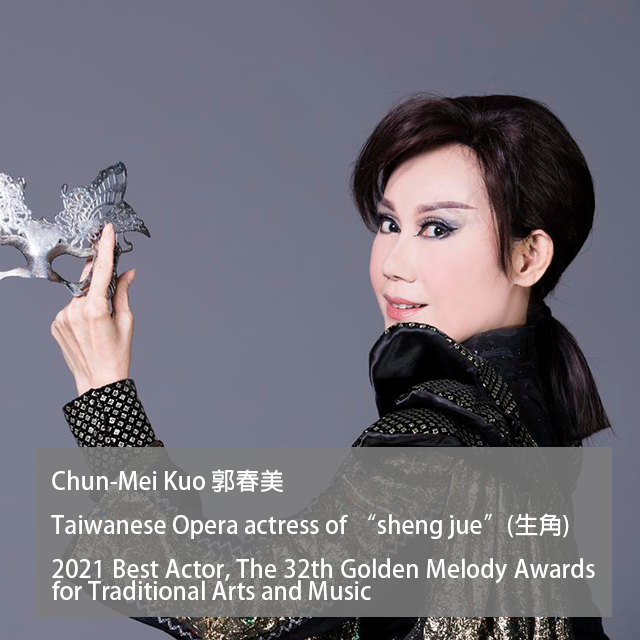
<style>
.page{position:relative;width:640px;height:640px}
.page>*{position:absolute;margin:0}
.t1{font:24px/22px "AdobeFanHeitiStd-Bold";color:#ffffff}
</style>
<div class="page">
<p class="t1" style="left:51px;top:469px;width:544px;height:131px;text-align:justify">Chun-Mei Kuo 郭春美<br><br>Taiwanese Opera actress of “sheng jue”(生角)<br><br>2021 Best Actor, The 32th Golden Melody Awards for Traditional Arts and Music</p>
</div>
